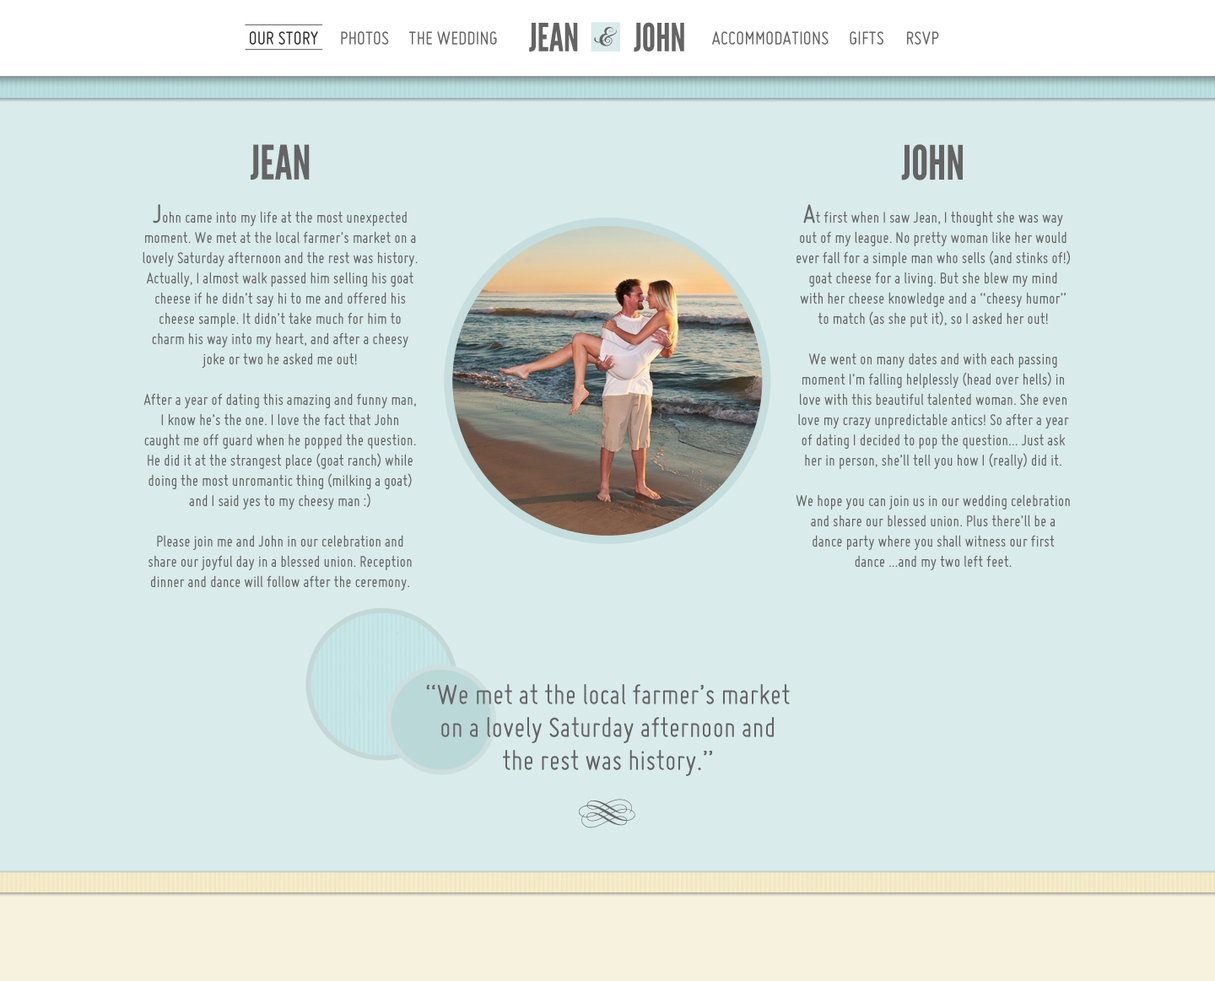
<style>
.page{position:relative;width:1215px;height:981px;background:#d9ebeb}
.page>*{position:absolute;margin:0}
.t1{font:38.8px "LeagueGothic";color:#656464;text-transform:uppercase}
.t2{font:20.3px "Miso";color:#2b2b2b;text-transform:uppercase}
.t3{font:20.3px "Miso";color:#656464;text-transform:uppercase}
.t4{font:47.3px "LeagueGothic";color:#656464;text-transform:uppercase}
.t5{font:16.9px "Miso";color:#656464}
.t6{font:28.7px "Miso";color:#656464}
.t7{font:30.4px/32.9px "Miso";color:#656464}
</style>
<div class="page">
<p class="t1" style="left:529px;top:23px;width:49px;height:29px">JEAN</p>
<p class="t1" style="left:634px;top:22px;width:50px;height:30px">JOHN</p>
<p class="t2" style="left:250px;top:31px;width:68px;height:14px">our story</p>
<p class="t3" style="left:341px;top:31px;width:48px;height:14px">photos</p>
<p class="t3" style="left:408px;top:31px;width:89px;height:14px">the wedding</p>
<p class="t3" style="left:712px;top:31px;width:117px;height:14px">accommodations</p>
<p class="t3" style="left:850px;top:31px;width:33px;height:14px">gifts</p>
<p class="t3" style="left:907px;top:31px;width:32px;height:14px">rsvp</p>
<p class="t4" style="left:251px;top:144px;width:59px;height:36px">jean</p>
<p class="t4" style="left:901px;top:144px;width:62px;height:37px">john</p>
<p class="t5" style="left:143px;top:204px;width:275px;height:387px;text-align:center"><span class="t6">J</span>ohn came into my life at the most unexpected moment. We met at the local farmer’s market on a lovely Saturday afternoon and the rest was history. Actually, I almost walk passed him selling his goat cheese if he didn’t say hi to me and offered his cheese sample. It didn’t take much for him to charm his way into my heart, and after a cheesy joke or two he asked me out! <br><br>After a year of dating this amazing and funny man, I know he’s the one. I love the fact that John caught me off guard when he popped the question. He did it at the strangest place (goat ranch) while doing the most unromantic thing (milking a goat) and I said yes to my cheesy man :)<br><br>Please join me and John in our celebration and share our joyful day in a blessed union. Reception dinner and dance will follow after the ceremony.</p>
<p class="t5" style="left:796px;top:204px;width:274px;height:366px;text-align:center"><span class="t6">A</span>t first when I saw Jean, I thought she was way out of my league. No pretty woman like her would ever fall for a simple man who sells (and stinks of!) goat cheese for a living. But she blew my mind with her cheese knowledge and a “cheesy humor” to match (as she put it), so I asked her out!<br><br>We went on many dates and with each passing moment I’m falling helplessly (head over hells) in love with this beautiful talented woman. She even love my crazy unpredictable antics! So after a year of dating I decided to pop the question... Just ask her in person, she’ll tell you how I (really) did it.<br><br>We hope you can join us in our wedding celebration and share our blessed union. Plus there’ll be a dance party where you shall witness our first dance ...and my two left feet.</p>
<p class="t7" style="left:426px;top:684px;width:364px;height:92px;text-align:center">“We met at the local farmer’s market on a lovely Saturday afternoon and the rest was history.”</p>
</div>
